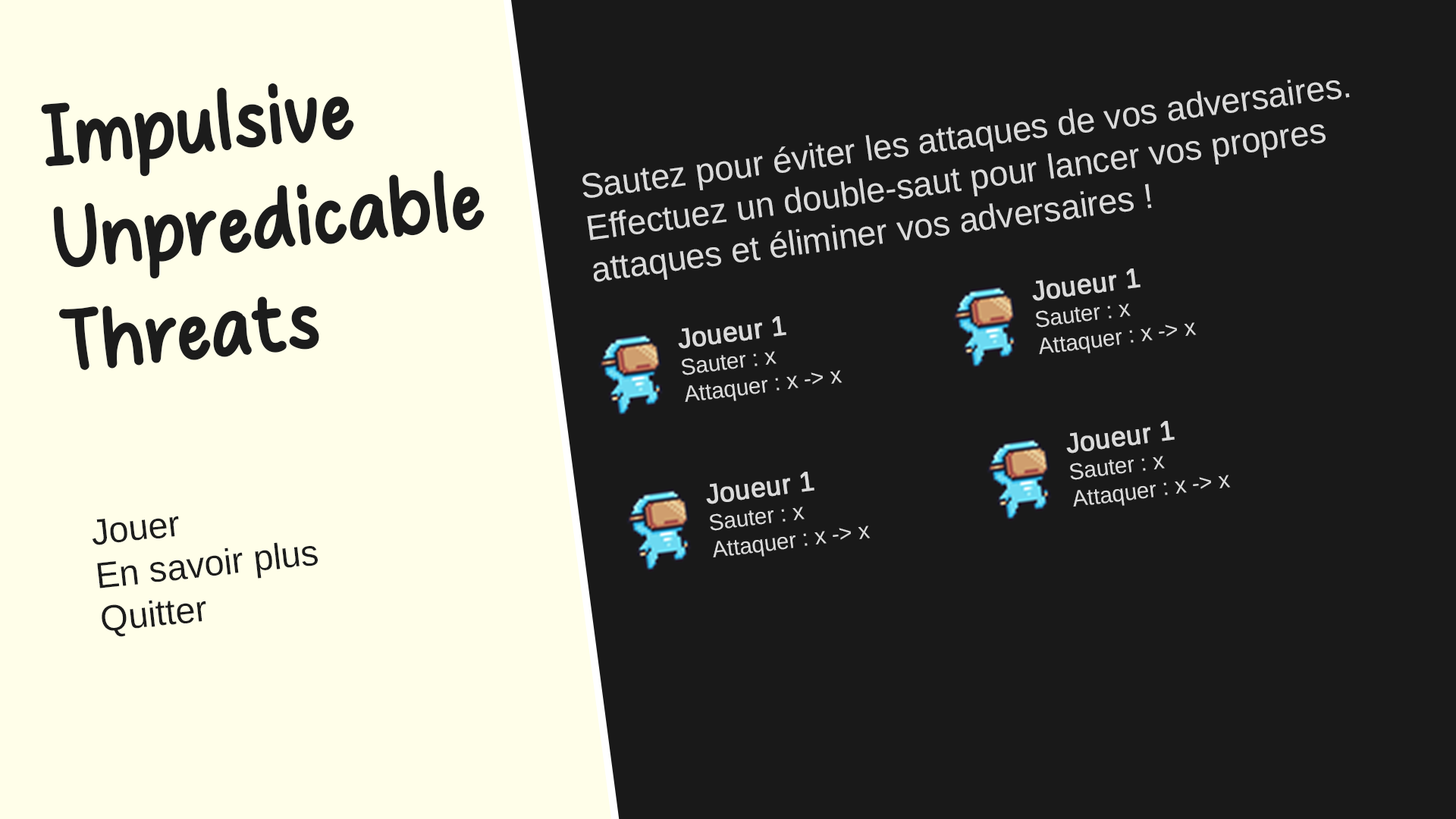
<style>
.page{position:relative;width:1456px;height:819px;background:#191919}
.page>*{position:absolute;margin:0}
.t1{font:85.7px "Wondercity";color:#1c1c1c}
.t2{font:34.9px "LiberationSans";color:#dbdbdb}
.t3{font:22.7px "LiberationSans";color:#dbdbdb}
.t4{font:27.3px "LiberationSans";color:#dbdbdb;font-weight:bold}
.t5{font:36.4px "LiberationSans";color:#1c1c1c}
</style>
<div class="page">
<p class="t1" style="left:41px;top:83px;width:444px;height:287px;rotate:-5deg">Impulsive <br>Unpredicable<br>Threats</p>
<p class="t2" style="left:582px;top:80px;width:768px;height:202px;rotate:-8deg">Sautez pour éviter les attaques de vos adversaires.<br>Effectuez un double-saut pour lancer vos propres attaques et éliminer vos adversaires !</p>
<p class="t3" style="left:1032px;top:268px;width:165px;height:86px;rotate:-7deg"><span class="t4">Joueur 1<br></span>Sauter : x<br>Attaquer : x -&gt; x</p>
<p class="t3" style="left:678px;top:316px;width:164px;height:86px;rotate:-7deg"><span class="t4">Joueur 1<br></span>Sauter : x<br>Attaquer : x -&gt; x</p>
<p class="t3" style="left:1066px;top:421px;width:165px;height:86px;rotate:-7deg"><span class="t4">Joueur 1<br></span>Sauter : x<br>Attaquer : x -&gt; x</p>
<p class="t3" style="left:706px;top:472px;width:165px;height:85px;rotate:-7deg"><span class="t4">Joueur 1<br></span>Sauter : x<br>Attaquer : x -&gt; x</p>
<p class="t5" style="left:92px;top:516px;width:226px;height:121px;rotate:-6deg">Jouer<br>En savoir plus<br>Quitter</p>
</div>
